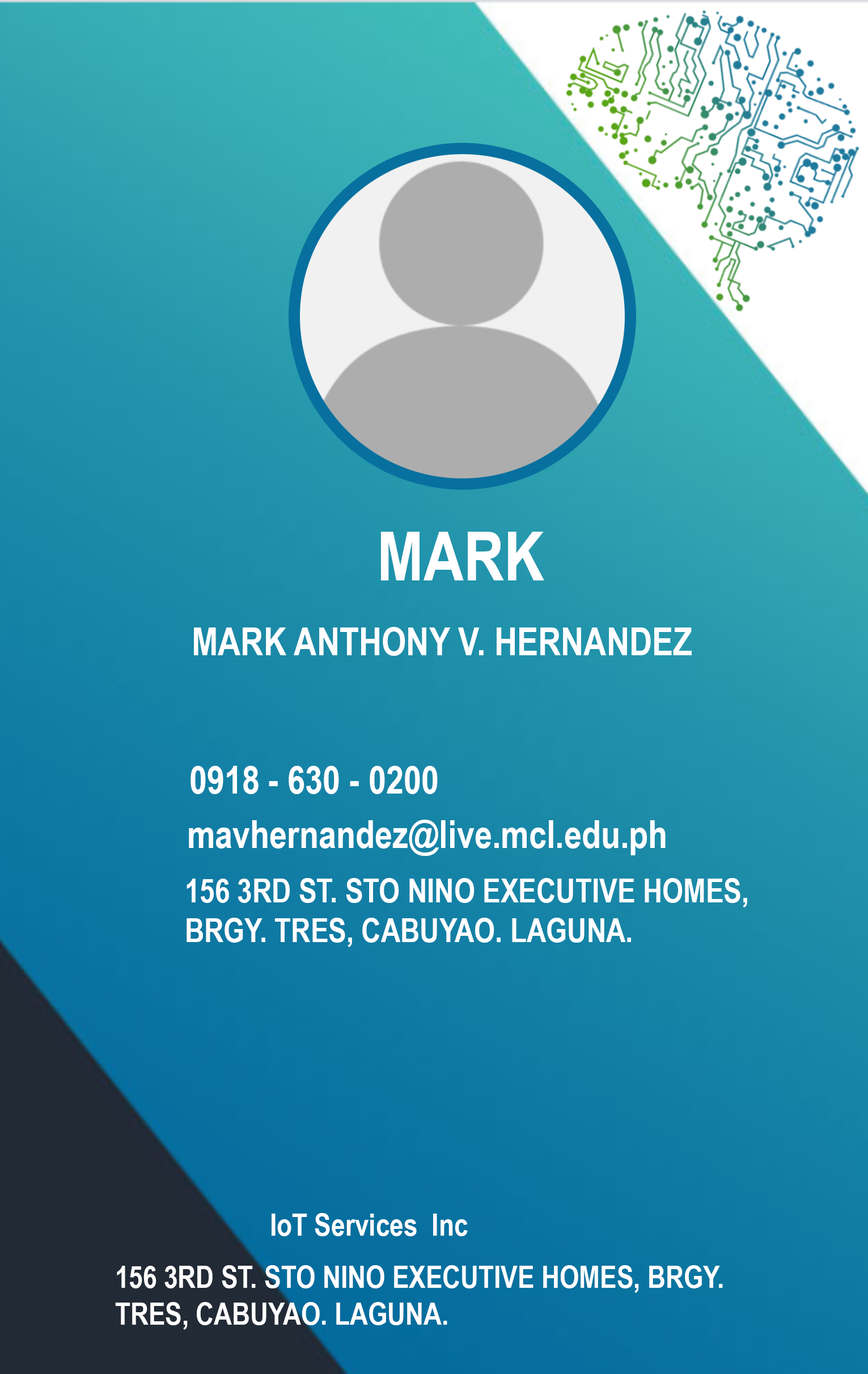
<style>
.page{position:relative;width:868px;height:1374px}
.page>*{position:absolute;margin:0}
.t1{font:68px "ArialNarrow-Bold";color:#ffffff}
.t2{font:38.5px "ArialNarrow-Bold";color:#ffffff}
.t3{font:32.9px "ArialNarrow-Bold";color:#ffffff}
.t4{font:30.6px "ArialNarrow-Bold";color:#ffffff}
</style>
<div class="page">
<p class="t1" style="left:380px;top:532px;width:164px;height:48px">MARK</p>
<p class="t2" style="left:194px;top:627px;width:498px;height:29px">MARK ANTHONY V. HERNANDEZ</p>
<p class="t2" style="left:190px;top:766px;width:248px;height:28px">0918 - 630 - 0200</p>
<p class="t2" style="left:189px;top:820px;width:476px;height:36px">mavhernandez@live.mcl.edu.ph</p>
<p class="t3" style="left:186px;top:878px;width:561px;height:69px;text-align:right">156 3RD ST. STO NINO EXECUTIVE HOMES,<br>BRGY. TRES, CABUYAO. LAGUNA.</p>
<p class="t4" style="left:272px;top:1213px;width:196px;height:23px">IoT Services  Inc</p>
<p class="t4" style="left:115px;top:1265px;width:608px;height:65px;text-align:right">156 3RD ST. STO NINO EXECUTIVE HOMES, BRGY. <br>TRES, CABUYAO. LAGUNA.</p>
</div>
